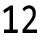
<style>
.page{position:relative;width:40px;height:40px;background:#ffffff}
.page>*{position:absolute;margin:0}
.t1{font:25.7px "Consolas";color:#000000;scale:0.81 1}
</style>
<div class="page">
<p class="t1" style="left:3px;top:5px;width:34px;height:28px">12</p>
</div>
